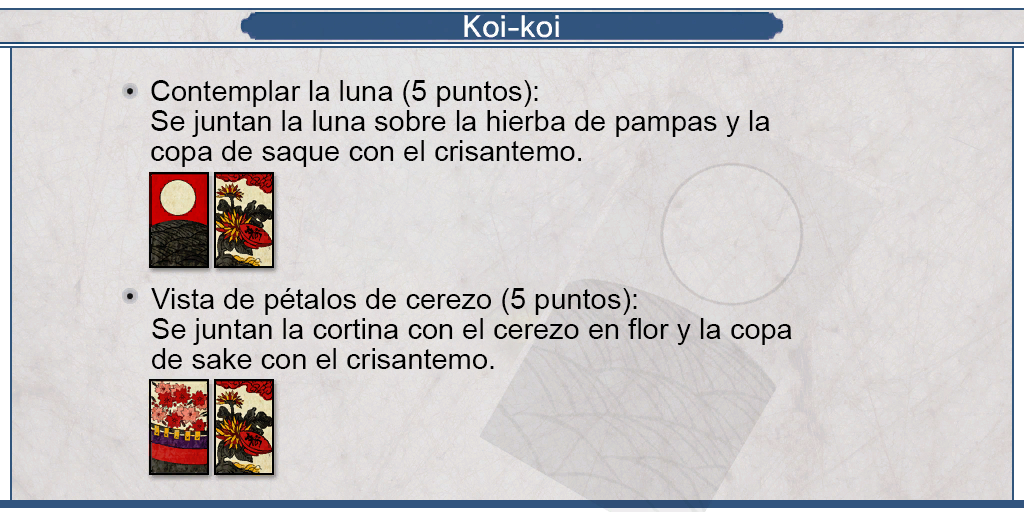
<style>
.page{position:relative;width:1024px;height:512px}
.page>*{position:absolute;margin:0}
.t1{font:29px/30px "ArialMT";color:#000000}
</style>
<div class="page">
<p class="t1" style="left:151px;top:80px;width:619px;height:87px;text-align:justify">Contemplar la luna (5 puntos):<br>Se juntan la luna sobre la hierba de pampas y la<br>copa de saque con el crisantemo.</p>
<p class="t1" style="left:151px;top:288px;width:641px;height:81px;text-align:justify">Vista de pétalos de cerezo (5 puntos):<br>Se juntan la cortina con el cerezo en flor y la copa<br>de sake con el crisantemo.</p>
</div>
